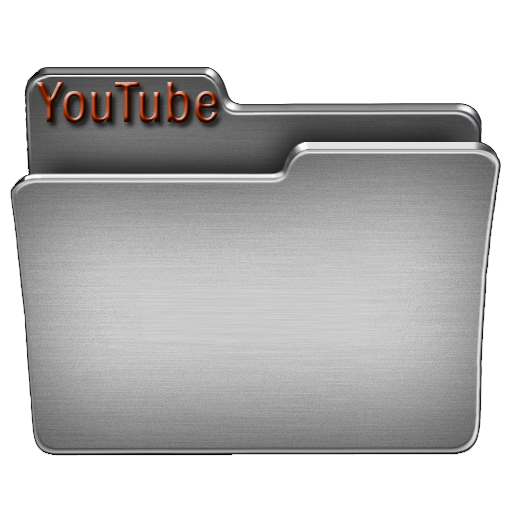
<style>
.page{position:relative;width:512px;height:512px;background:#ffffff}
.page>*{position:absolute;margin:0}
.t1{font:60px "FranklinGothic-MediumCond"}
</style>
<div class="page">
<p class="t1" style="left:36px;top:82px;width:183px;height:41px">YouTube</p>
</div>
